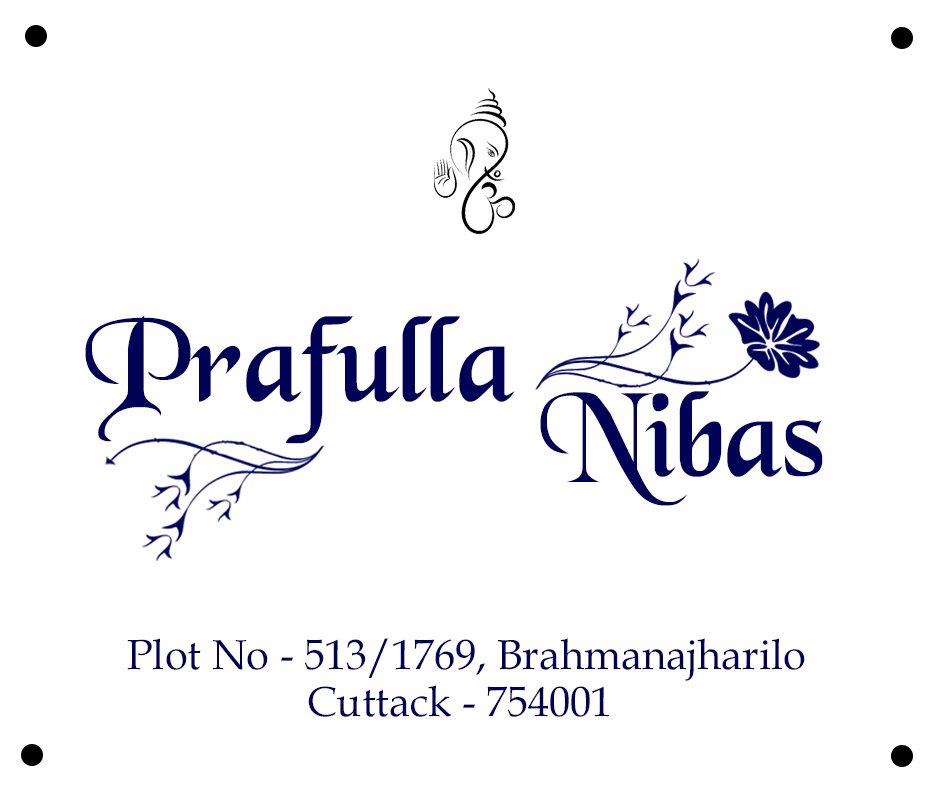
<style>
.page{position:relative;width:936px;height:792px;background:#ffffff}
.page>*{position:absolute;margin:0}
.t1{font:127px "BlackChancery";color:#000256}
.t2{font:42.1px "BookAntiqua";color:#000256}
</style>
<div class="page">
<p class="t1" style="left:85px;top:315px;width:430px;height:129px">Prafulla</p>
<p class="t1" style="left:540px;top:391px;width:283px;height:115px">Nibas</p>
<p class="t2" style="left:127px;top:638px;width:678px;height:43px">Plot No - 513/1769, Brahmanajharilo</p>
<p class="t2" style="left:308px;top:685px;width:301px;height:32px">Cuttack - 754001</p>
</div>
